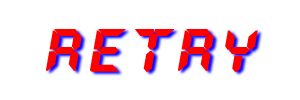
<style>
.page{position:relative;width:300px;height:100px;background:#ffffff}
.page>*{position:absolute;margin:0}
.t1{font:60px "QuartzMS";letter-spacing:0.075em;color:#ff0000;font-weight:bold;font-style:italic}
</style>
<div class="page">
<p class="t1" style="left:46px;top:29px;width:212px;height:43px">RETRY</p>
</div>
